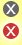
<style>
.page{position:relative;width:22px;height:45px}
.page>*{position:absolute;margin:0}
.t1{font:18px "Verdana";letter-spacing:0.1em;color:#ffffff}
</style>
<div class="page">
<p class="t1" style="left:6px;top:4px;width:10px;height:10px">x</p>
<p class="t1" style="left:6px;top:26px;width:10px;height:10px">x</p>
</div>
